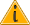
<style>
.page{position:relative;width:30px;height:25px;background:#ffffff}
.page>*{position:absolute;margin:0}
.t1{font:30px "Gabriola";color:#3d3d3d}
</style>
<div class="page">
<p class="t1" style="left:13px;top:6px;width:5px;height:16px">i</p>
</div>
